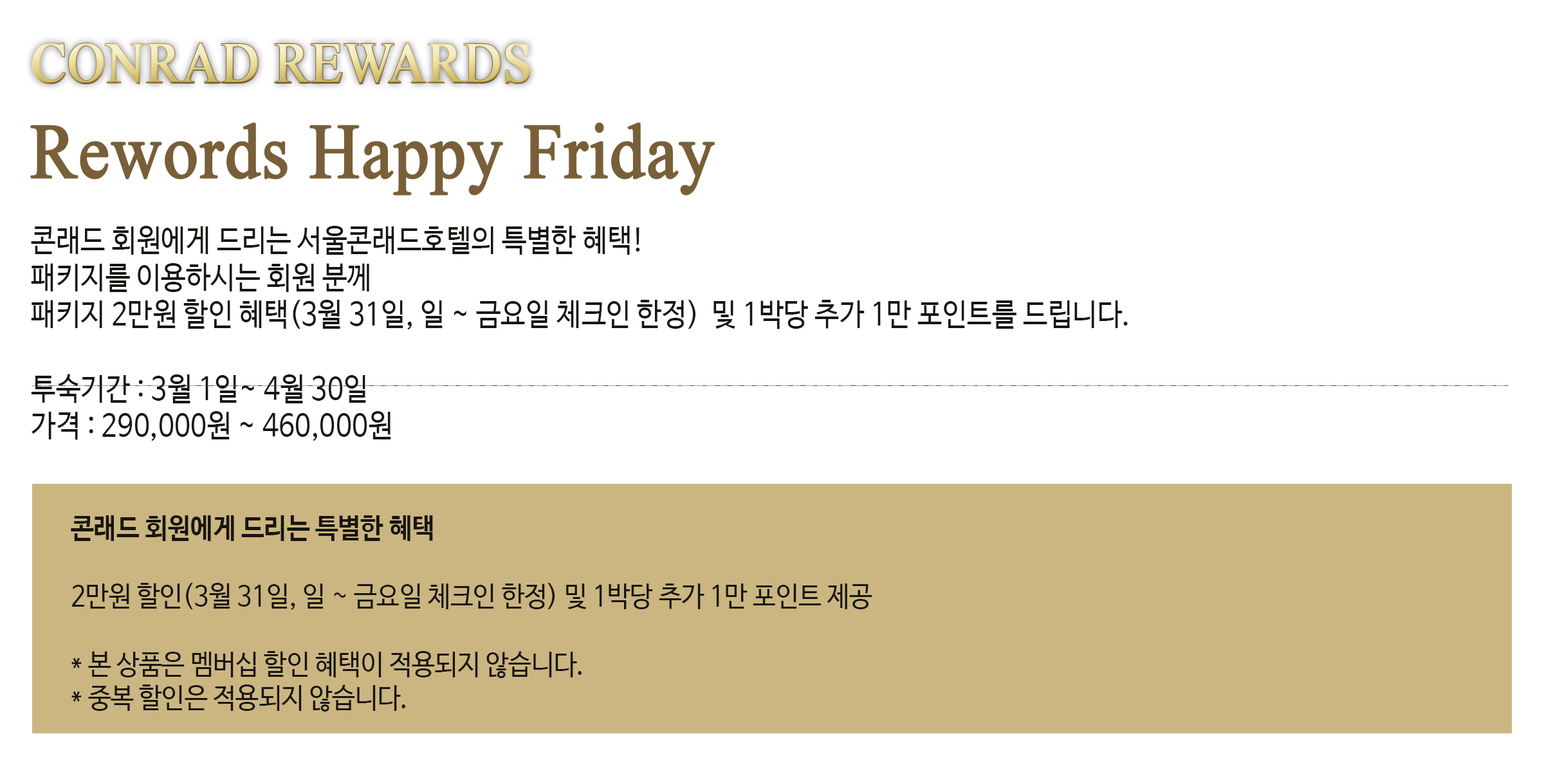
<style>
.page{position:relative;width:1544px;height:772px;background:#ffffff}
.page>*{position:absolute;margin:0}
.t1{font:57.9px "TimesNewRomanPSMT";font-weight:bold;scale:0.9 1}
.t2{font:77.2px "TimesNewRomanPSMT";color:#785f37;font-weight:bold;scale:0.9 1}
.t3{font:30.9px "NanumBarunGothic";color:#181510;scale:0.9 1}
.t4{font:28.3px "NanumBarunGothic";color:#181510;scale:0.9 1}
.t5{font:28.3px "NanumBarunGothicBold";color:#181510;scale:0.9 1}
</style>
<div class="page">
<p class="t1" style="left:32px;top:43px;width:498px;height:41px">CONRAD REWARDS</p>
<p class="t2" style="left:30px;top:122px;width:685px;height:74px">Rewords Happy Friday</p>
<p class="t3" style="left:31px;top:226px;width:1097px;height:215px">콘래드 회원에게 드리는 서울콘래드호텔의 특별한 혜택!<br>패키지를 이용하시는 회원 분께 <br>패키지 2만원 할인 혜택(3월 31일, 일 ~ 금요일 체크인 한정)  및 1박당 추가 1만 포인트를 드립니다.<br><br>투숙기간 : 3월 1일~ 4월 30일<br>가격 : 290,000원 ~ 460,000원</p>
<p class="t4" style="left:71px;top:515px;width:802px;height:197px"><span class="t5">콘래드 회원에게 드리는 특별한 혜택<br></span><br>2만원 할인(3월 31일, 일 ~ 금요일 체크인 한정) 및 1박당 추가 1만 포인트 제공<br><br>* 본 상품은 멤버십 할인 혜택이 적용되지 않습니다.<br>* 중복 할인은 적용되지 않습니다.</p>
</div>
